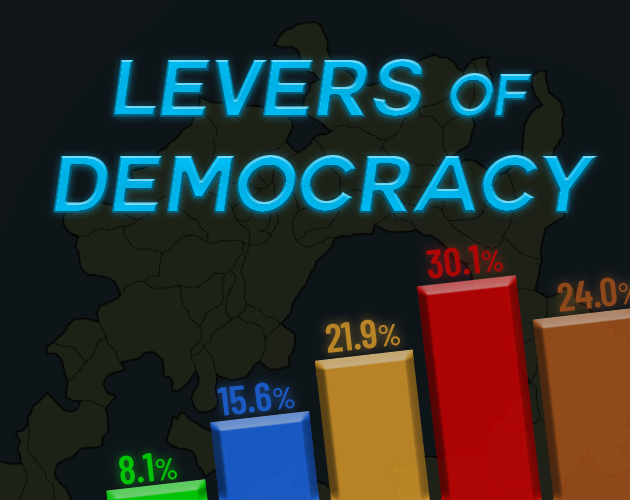
<style>
.page{position:relative;width:630px;height:500px;background:#0e1519}
.page>*{position:absolute;margin:0}
.t1{font:80px "Couture-BoldItalic"}
.t2{font:60px "Couture-BoldItalic"}
.t3{font:40px "BarlowCondensed-SemiBold";color:#ae0604}
.t4{font:30px "BarlowCondensed-SemiBold";color:#ae0604}
.t5{font:40px "BarlowCondensed-SemiBold";color:#b98526}
.t6{font:30px "BarlowCondensed-SemiBold";color:#b98526}
.t7{font:40px "BarlowCondensed-SemiBold";color:#1b5ac3}
.t8{font:30px "BarlowCondensed-SemiBold";color:#1b5ac3}
.t9{font:40px "BarlowCondensed-SemiBold";color:#02c304}
.t10{font:30px "BarlowCondensed-SemiBold";color:#02c304}
</style>
<div class="page">
<p class="t1" style="left:53px;top:59px;width:545px;height:155px;text-align:center">Levers <span class="t2">of<br></span>Democracy</p>
<p class="t3" style="left:426px;top:245px;width:77px;height:34px;rotate:-6deg">30.1<span class="t4">%</span></p>
<p class="t5" style="left:325px;top:319px;width:75px;height:34px;rotate:-6deg">21.9<span class="t6">%</span></p>
<p class="t7" style="left:217px;top:382px;width:78px;height:34px;rotate:-6deg">15.6<span class="t8">%</span></p>
<p class="t9" style="left:119px;top:453px;width:58px;height:32px;rotate:-6deg">8.1<span class="t10">%</span></p>
</div>
